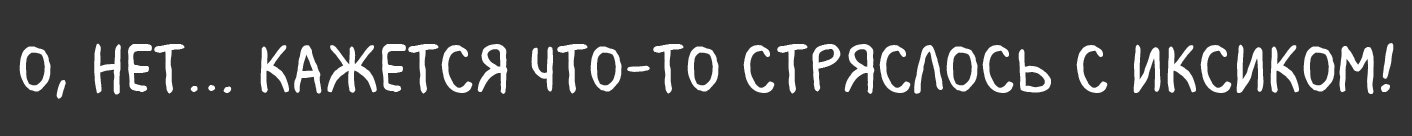
<style>
.page{position:relative;width:1412px;height:136px;background:#333333}
.page>*{position:absolute;margin:0}
.t1{font:72px "MilkMustacheBB";color:#ffffff}
</style>
<div class="page">
<p class="t1" style="left:19px;top:43px;width:1375px;height:56px">О, нет… Кажется что-то стряслось с Иксиком!</p>
</div>
